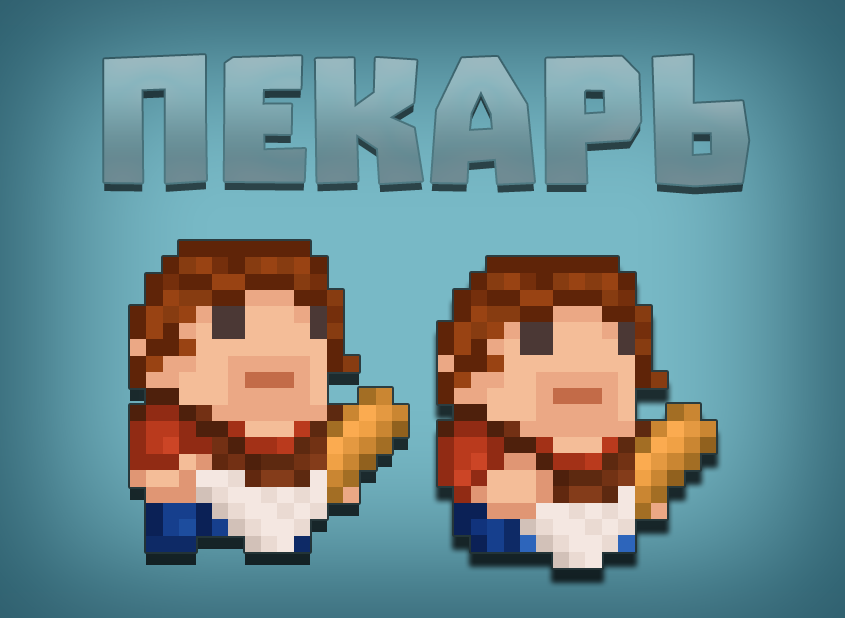
<style>
.page{position:relative;width:845px;height:618px}
.page>*{position:absolute;margin:0}
.t1{font:200px "Troika"}
</style>
<div class="page">
<p class="t1" style="left:104px;top:55px;width:645px;height:131px">пекарь</p>
</div>
